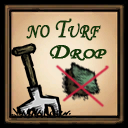
<style>
.page{position:relative;width:128px;height:128px}
.page>*{position:absolute;margin:0}
.t1{font:28.5px "STLiti";color:#133509;font-variant:small-caps;font-weight:bold;scale:0.81 1}
</style>
<div class="page">
<p class="t1" style="left:26px;top:18px;width:75px;height:23px">no Turf</p>
</div>
